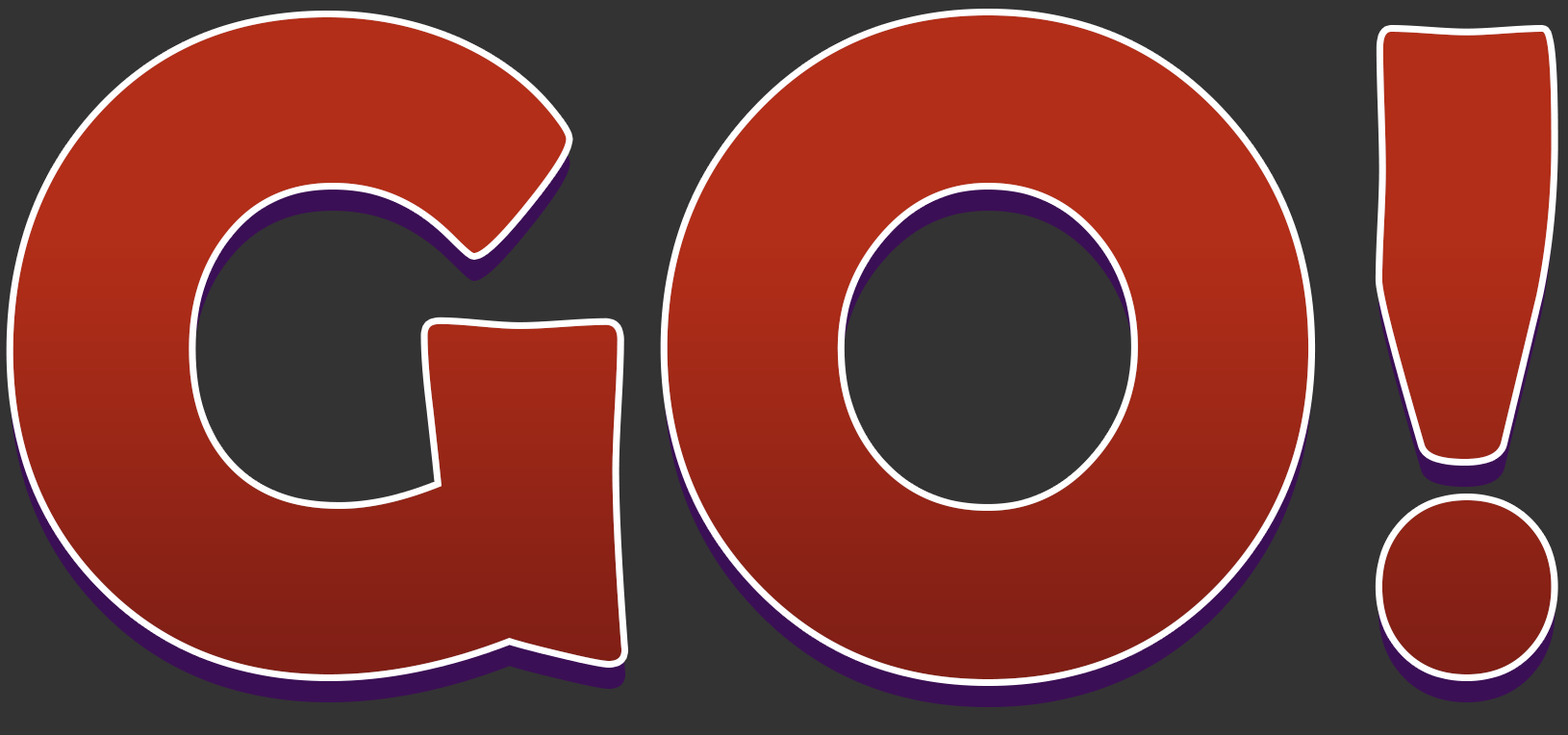
<style>
.page{position:relative;width:1568px;height:735px;background:#333333}
.page>*{position:absolute;margin:0}
.t1{font:920.2px "BerlinSansFBDemi-Bold";color:#a52a18;text-transform:uppercase}
</style>
<div class="page">
<p class="t1" style="left:13px;top:15px;width:1539px;height:664px">go!</p>
</div>
